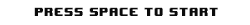
<style>
.page{position:relative;width:250px;height:25px;background:#ffffff}
.page>*{position:absolute;margin:0}
.t1{font:10px "8BITWONDERNominal";color:#0b0b0b}
</style>
<div class="page">
<p class="t1" style="left:34px;top:7px;width:184px;height:9px">Press Space to start</p>
</div>
